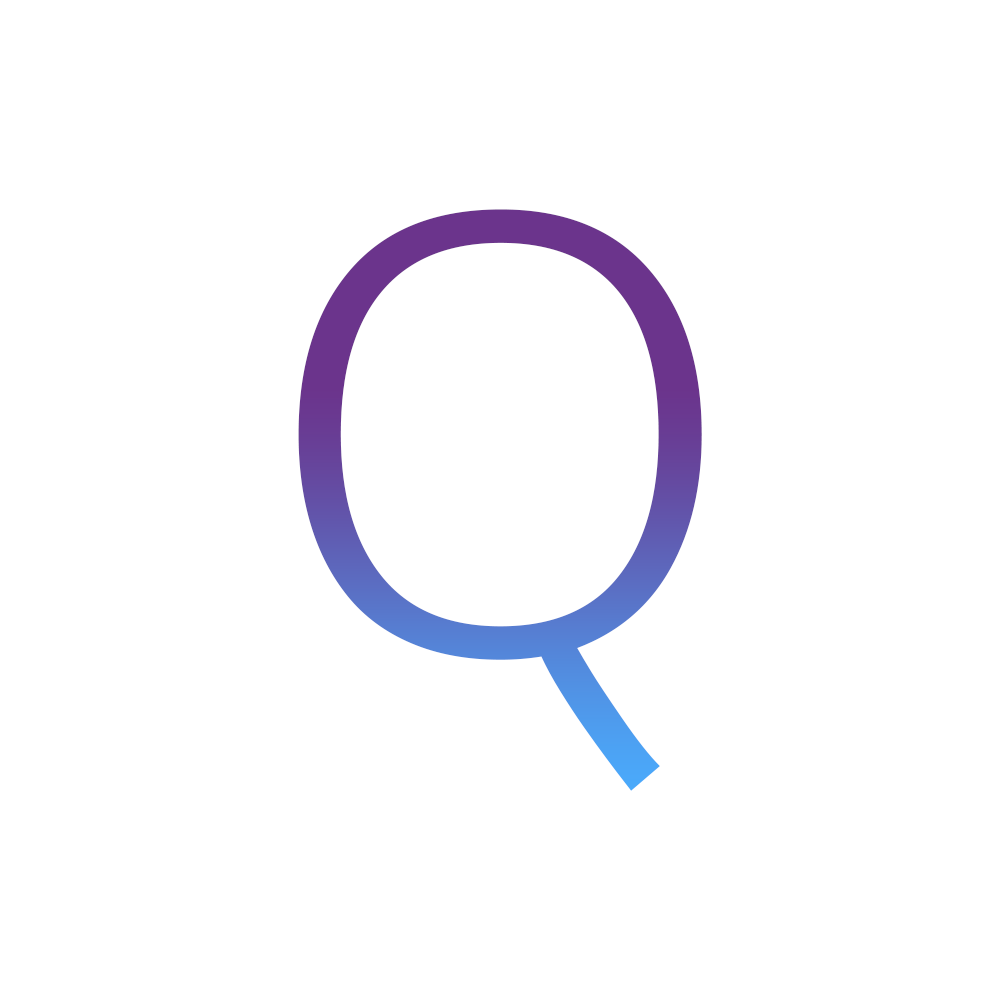
<style>
.page{position:relative;width:1000px;height:1000px;background:#ffffff}
.page>*{position:absolute;margin:0}
.t1{font:600px "Oxygen-Light"}
</style>
<div class="page">
<p class="t1" style="left:298px;top:209px;width:404px;height:582px">Q</p>
</div>
